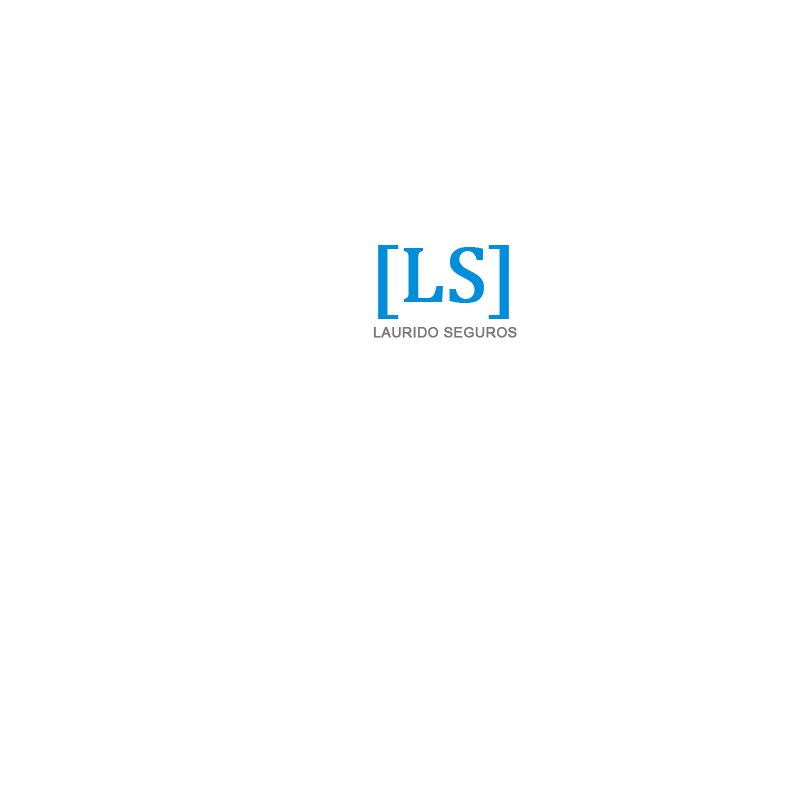
<style>
.page{position:relative;width:800px;height:800px;background:#ffffff}
.page>*{position:absolute;margin:0}
.t1{font:14px "ArialMT";color:#777777;font-weight:bold}
.t2{font:80px "Cambria";color:#008dd9;font-weight:bold}
</style>
<div class="page">
<p class="t1" style="left:373px;top:245px;width:144px;height:93px"><span class="t2">[LS]<br><br></span> LAURIDO SEGUROS</p>
</div>
